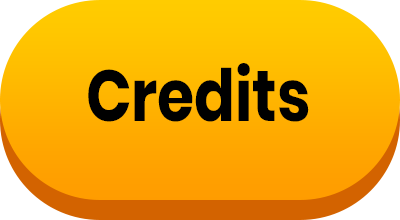
<style>
.page{position:relative;width:400px;height:220px}
.page>*{position:absolute;margin:0}
.t1{font:72px "Poppins-Bold";color:#000000;scale:0.83 1}
</style>
<div class="page">
<p class="t1" style="left:88px;top:63px;width:221px;height:59px">Credits</p>
</div>
